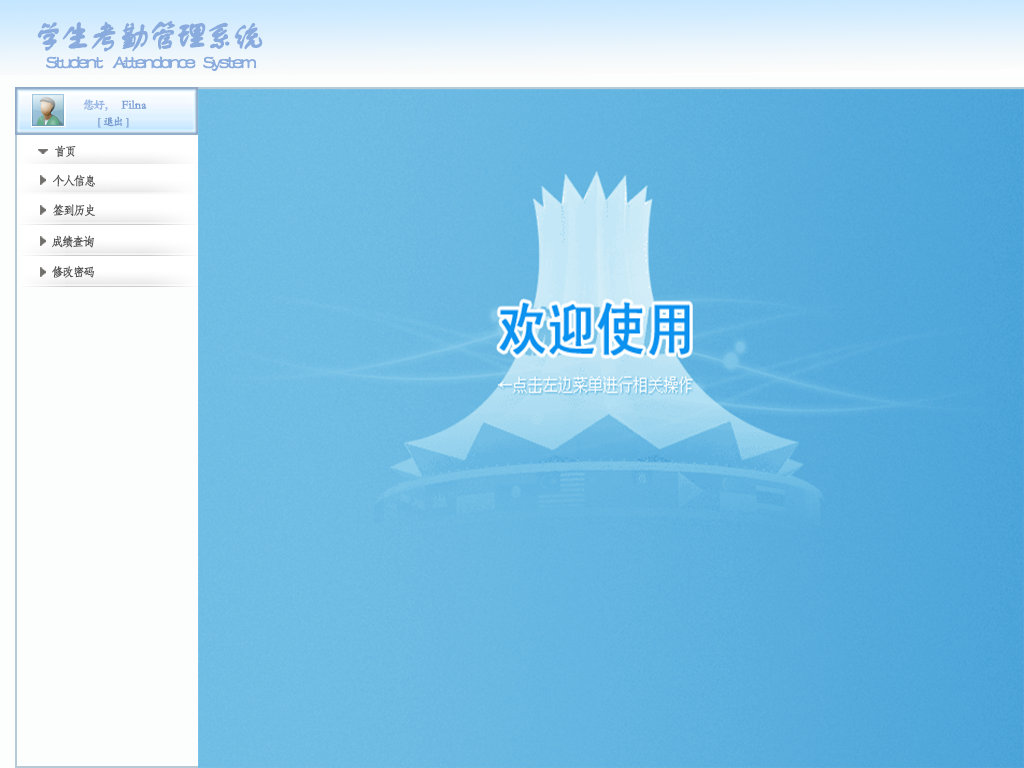
<style>
.page{position:relative;width:1024px;height:768px}
.page>*{position:absolute;margin:0}
.t1{font:32.7px "FZSTK--GBK1-0";letter-spacing:-0.15em;color:#89abde;font-weight:bold}
.t2{font:19.6px "FZSTK--GBK1-0";letter-spacing:-0.15em;color:#89abde;font-weight:bold}
.t3{font:12px "STKaiti";letter-spacing:-0.15em;color:#99b7e5;font-weight:bold}
.t4{font:12px "STKaiti";color:#789cd3;font-weight:bold}
.t5{font:10.9px "STKaiti";letter-spacing:-0.15em;color:#789cd3;font-weight:bold}
.t6{font:12px "STFangsong";letter-spacing:-0.15em;color:#555555;font-weight:bold}
</style>
<div class="page">
<p class="t1" style="left:37px;top:21px;width:226px;height:31px">学生考勤管理系统</p>
<p class="t2" style="left:46px;top:56px;width:211px;height:16px">Student     Attendance    System</p>
<p class="t3" style="left:83px;top:99px;width:25px;height:12px">您好，</p>
<p class="t4" style="left:121px;top:100px;width:26px;height:9px">Filna</p>
<p class="t5" style="left:98px;top:116px;width:31px;height:12px">[   退出   ]</p>
<p class="t6" style="left:55px;top:145px;width:21px;height:13px">首页</p>
<p class="t6" style="left:52px;top:174px;width:43px;height:13px">个人信息</p>
<p class="t6" style="left:53px;top:204px;width:42px;height:13px">签到历史</p>
<p class="t6" style="left:52px;top:235px;width:42px;height:13px">成绩查询</p>
<p class="t6" style="left:52px;top:266px;width:43px;height:12px">修改密码</p>
</div>
